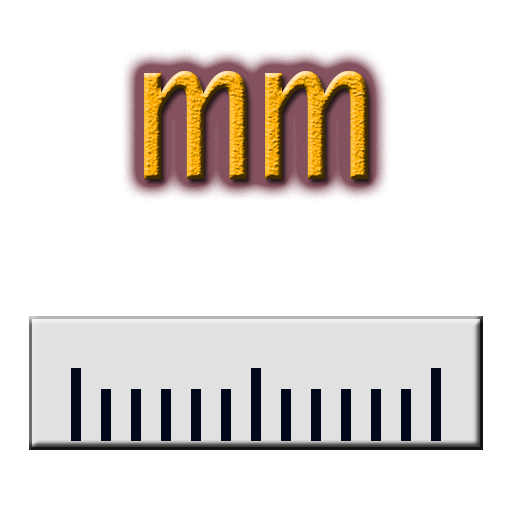
<style>
.page{position:relative;width:512px;height:512px;background:#ffffff}
.page>*{position:absolute;margin:0}
.t1{font:200px "LucidaConsole"}
</style>
<div class="page">
<p class="t1" style="left:144px;top:71px;width:224px;height:108px">mm</p>
</div>
